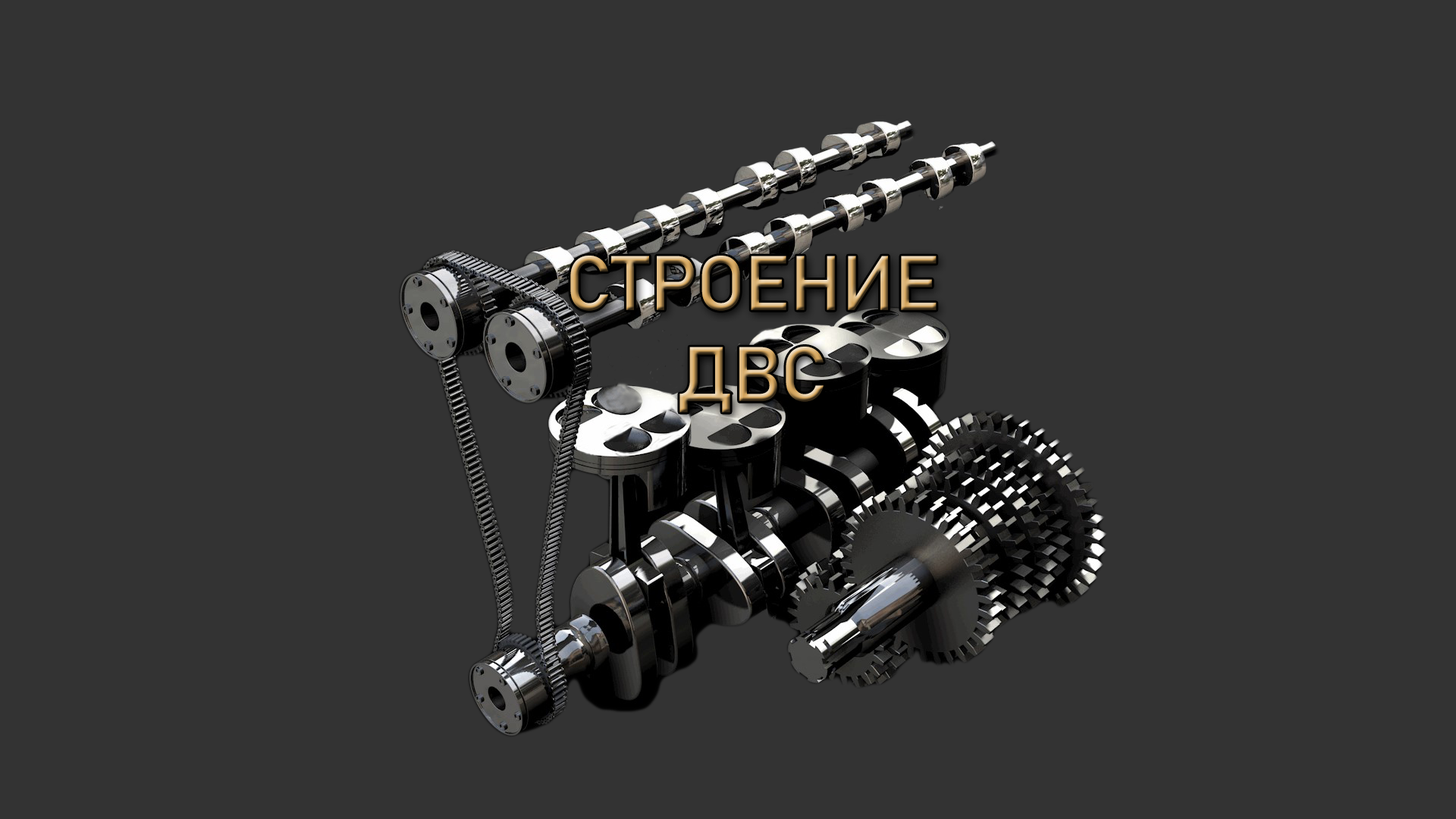
<style>
.page{position:relative;width:1456px;height:819px;background:#333333}
.page>*{position:absolute;margin:0}
.t1{font:75.8px "Bahnschrift";text-transform:uppercase}
</style>
<div class="page">
<p class="t1" style="left:570px;top:256px;width:367px;height:157px;text-align:center">Строение ДВС</p>
</div>
